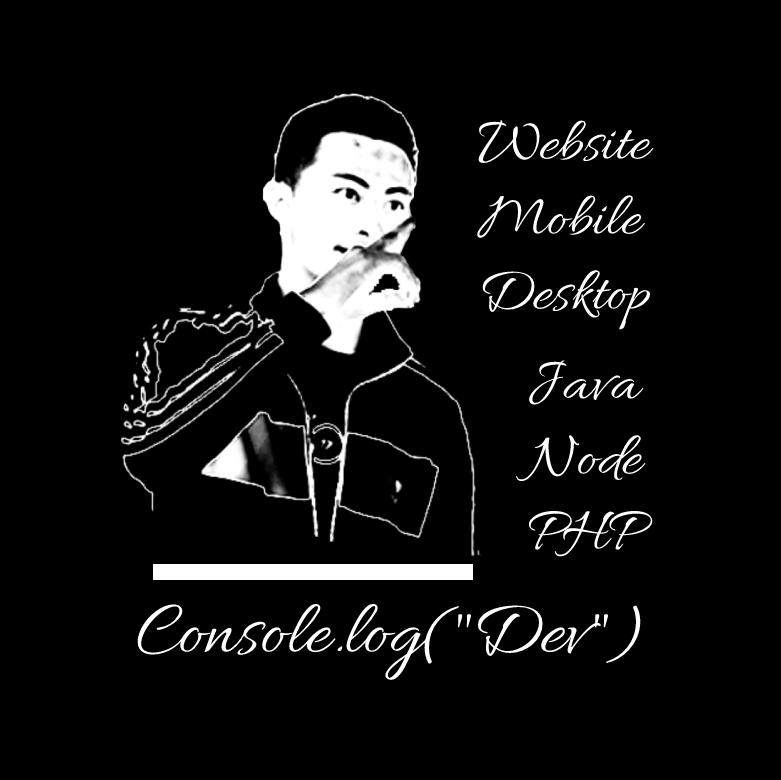
<style>
.page{position:relative;width:781px;height:780px;background:#000000}
.page>*{position:absolute;margin:0}
.t1{font:62.5px "Allura-Regular";color:#ffffff}
.t2{font:78px "Allura-Regular";color:#ffffff}
</style>
<div class="page">
<p class="t1" style="left:477px;top:120px;width:177px;height:210px">Website<br>Mobile<br>Desktop</p>
<p class="t1" style="left:516px;top:360px;width:137px;height:197px">Java<br>Node<br>PHP</p>
<p class="t2" style="left:137px;top:603px;width:504px;height:77px">Console.log("Dev")</p>
</div>
